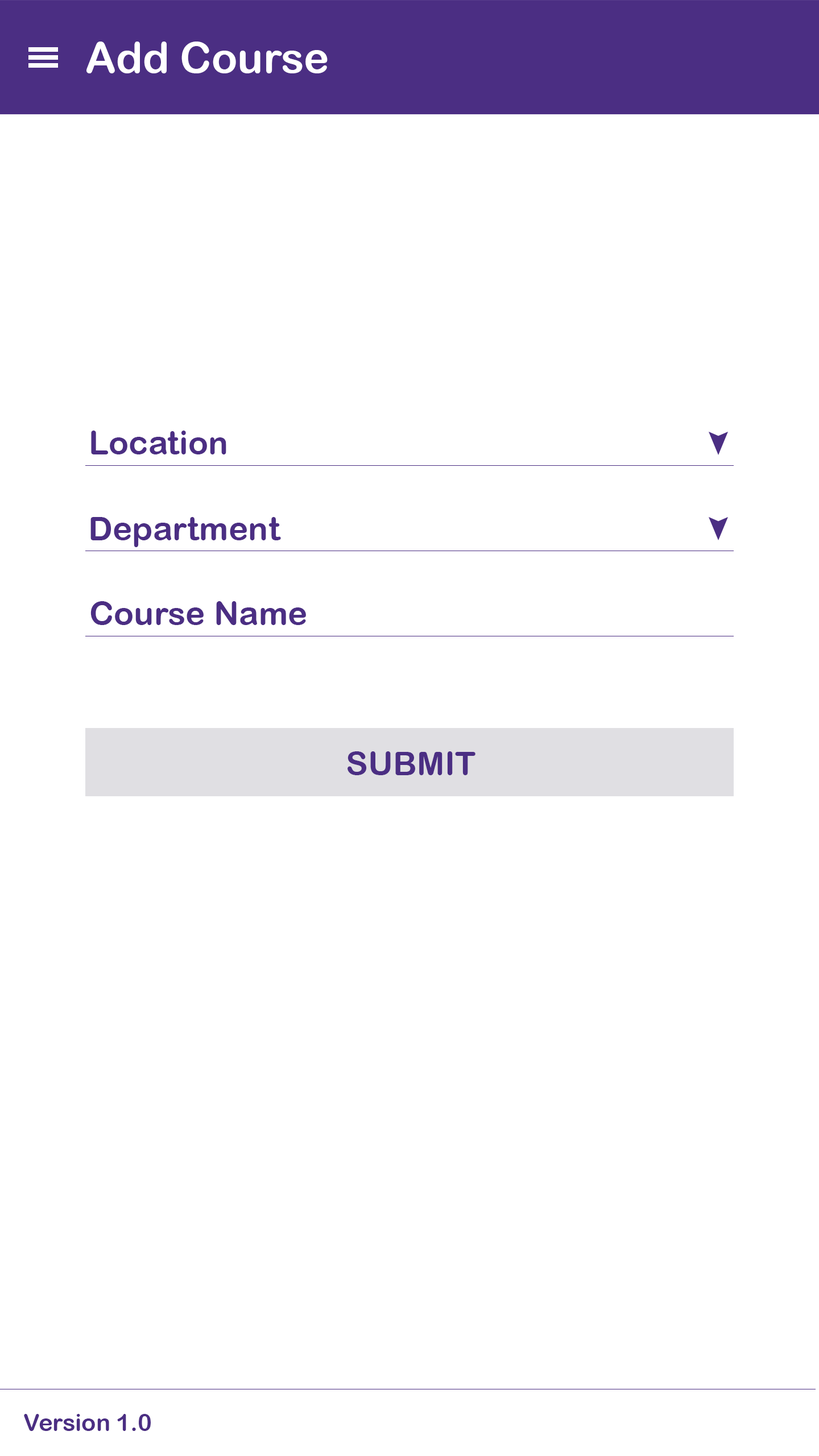
<style>
.page{position:relative;width:819px;height:1456px;background:#ffffff}
.page>*{position:absolute;margin:0}
.t1{font:42.7px "ArialRoundedMTBold";color:#ffffff}
.t2{font:33.2px "ArialRoundedMTBold";color:#4b2e83}
.t3{font:23.7px "ArialRoundedMTBold";color:#4b2e83}
</style>
<div class="page">
<p class="t1" style="left:86px;top:42px;width:242px;height:31px">Add Course</p>
<p class="t2" style="left:91px;top:431px;width:135px;height:23px">Location</p>
<p class="t2" style="left:90px;top:517px;width:191px;height:30px">Department</p>
<p class="t2" style="left:90px;top:601px;width:216px;height:24px">Course Name</p>
<p class="t2" style="left:348px;top:751px;width:127px;height:24px">SUBMIT</p>
<p class="t3" style="left:24px;top:1414px;width:127px;height:17px">Version 1.0</p>
</div>
